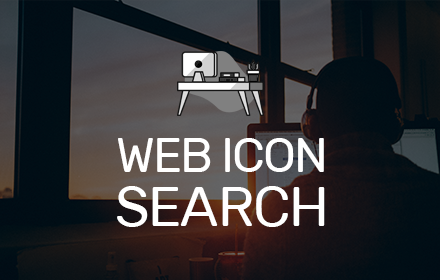
<style>
.page{position:relative;width:440px;height:280px}
.page>*{position:absolute;margin:0}
.t1{font:49.2px/53.9px "Rubik-Regular";letter-spacing:-0.04em;color:#ffffff}
.t2{font:56.2px/53.9px "Rubik-Regular";letter-spacing:-0.02em;color:#ffffff}
</style>
<div class="page">
<p class="t1" style="left:117px;top:138px;width:208px;height:89px;text-align:center">WEB ICON<br><span class="t2">SEARCH</span></p>
</div>
